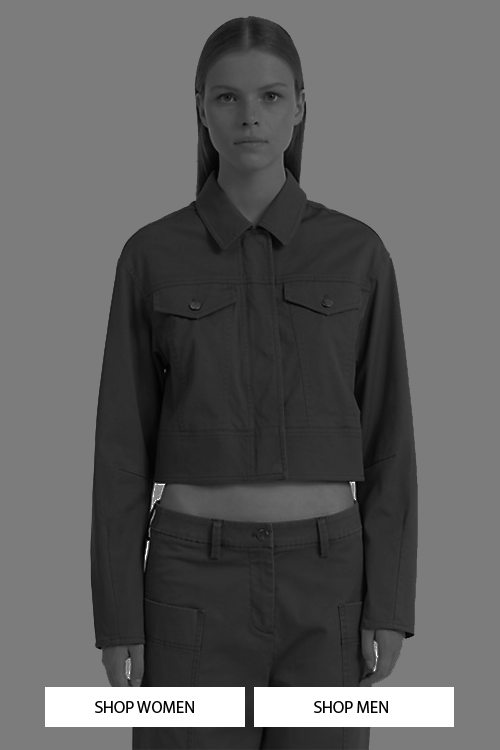
<style>
.page{position:relative;width:500px;height:750px;background:#7c7c7c}
.page>*{position:absolute;margin:0}
.t1{font:16.7px "MyriadPro-Regular";color:#050505}
</style>
<div class="page">
<p class="t1" style="left:95px;top:701px;width:99px;height:12px">SHOP WOMEN</p>
<p class="t1" style="left:314px;top:701px;width:74px;height:12px">SHOP MEN</p>
</div>
